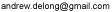
<style>
.page{position:relative;width:112px;height:12px;background:#ffffff}
.page>*{position:absolute;margin:0}
.t1{font:9px "ArialMT"}
</style>
<div class="page">
<p class="t1" style="left:1px;top:2px;width:109px;height:9px">andrew.delong@gmail.com</p>
</div>
